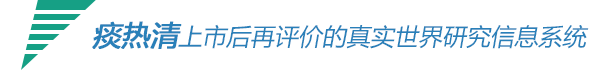
<style>
.page{position:relative;width:600px;height:70px;background:#ffffff}
.page>*{position:absolute;margin:0}
.t1{font:24px "MicrosoftYaHei";color:#2980b9;font-style:italic}
.t2{font:28px "MicrosoftYaHei";color:#2980b9;font-weight:bold;font-style:italic}
</style>
<div class="page">
<p class="t1" style="left:92px;top:21px;width:497px;height:28px"><span class="t2">痰热清</span>上市后再评价的真实世界研究信息系统</p>
</div>
